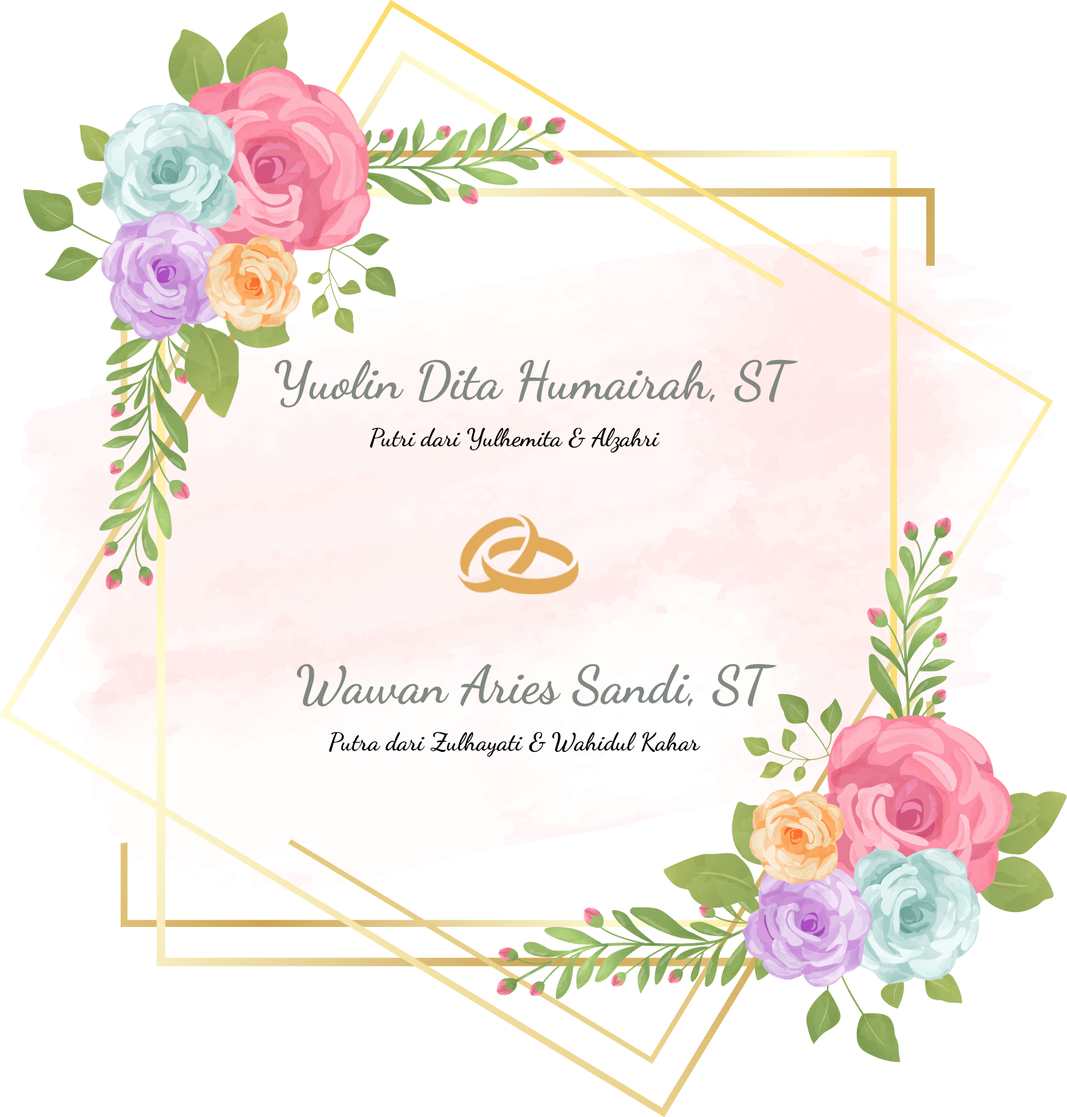
<style>
.page{position:relative;width:1067px;height:1117px;background:#ffffff}
.page>*{position:absolute;margin:0}
.t1{font:52.5px "DancingScript-Bold";color:#828882}
.t2{font:24.8px "DancingScript-Bold";color:#000000}
</style>
<div class="page">
<p class="t1" style="left:274px;top:359px;width:525px;height:48px">Yuolin Dita Humairah, ST</p>
<p class="t2" style="left:370px;top:428px;width:290px;height:25px">Putri dari Yulhemita &amp; Alzahri</p>
<p class="t1" style="left:297px;top:664px;width:480px;height:43px">Wawan Aries Sandi, ST</p>
<p class="t2" style="left:329px;top:732px;width:372px;height:25px">Putra dari Zulhayati &amp; Wahidul Kahar</p>
</div>
